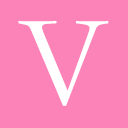
<style>
.page{position:relative;width:128px;height:128px;background:#fc83b8}
.page>*{position:absolute;margin:0}
.t1{font:130px "STFangsong";letter-spacing:-0.025em;color:#ffffff}
</style>
<div class="page">
<p class="t1" style="left:18px;top:21px;width:91px;height:85px">V</p>
</div>
